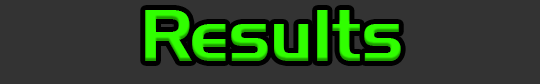
<style>
.page{position:relative;width:540px;height:84px;background:#333333}
.page>*{position:absolute;margin:0}
.t1{font:71.1px "HandelGothicBT-Regular";color:#30ff00}
</style>
<div class="page">
<p class="t1" style="left:145px;top:10px;width:256px;height:51px">Results</p>
</div>
